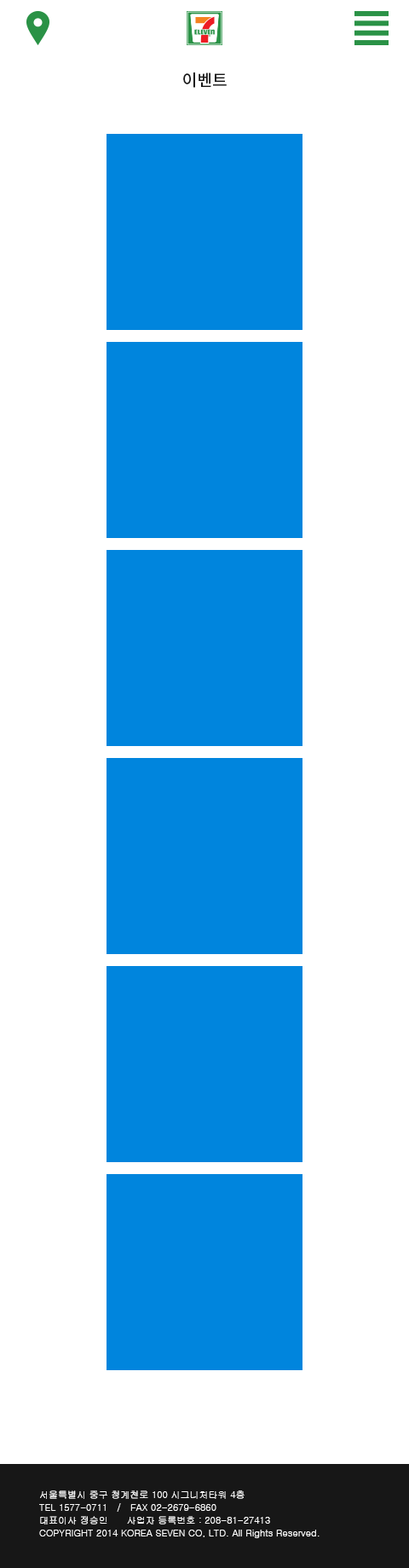
<style>
.page{position:relative;width:409px;height:1568px;background:#ffffff}
.page>*{position:absolute;margin:0}
.t1{font:16.2px "NotoSansCJKkr-Medium";color:#171717}
.t2{font:9.4px/12.8px "Gulim";color:#ffffff}
</style>
<div class="page">
<p class="t1" style="left:183px;top:72px;width:44px;height:16px">이벤트</p>
<p class="t2" style="left:39px;top:1490px;width:281px;height:48px">서울특별시 중구 청계천로 100 시그니처타워 4층<br>TEL 1577-0711   /   FAX 02-2679-6860<br>대표이사 정승인      사업자 등록번호 : 208-81-27413<br>COPYRIGHT 2014 KOREA SEVEN CO, LTD. All Rights Reserved.</p>
</div>
